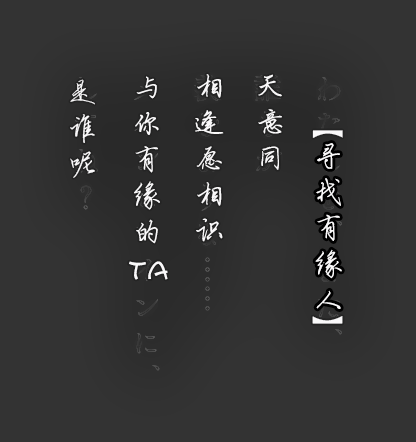
<style>
.page{position:relative;width:416px;height:442px;background:#333333}
.page>*{position:absolute;margin:0}
.t1{font:30px/36px "QXyingbixing";color:#faf9fa}
.t2{font:30px/36px "FZKATJW--GB1-0";color:#faf9fa}
.t3{font:30px "QXyingbixing";color:#faf8f9}
</style>
<div class="page">
<p class="t1" style="left:129px;top:76px;width:39px;height:204px;text-align:center">与<br>你<br>有<br>缘<br>的<br><span class="t2">ta</span></p>
<p class="t1" style="left:195px;top:74px;width:29px;height:168px;text-align:center">相<br>逢<br>愿<br>相<br>识</p>
<p class="t1" style="left:258px;top:74px;width:25px;height:96px;text-align:center">天<br>意<br>同</p>
<p class="t1" style="left:70px;top:79px;width:25px;height:99px;text-align:center">是<br>谁<br>呢</p>
<p class="t3" style="left:312px;top:130px;width:31px;height:194px;rotate:90deg">【                     】</p>
<p class="t1" style="left:315px;top:143px;width:27px;height:166px;text-align:center">寻<br>找<br>有<br>缘<br>人</p>
</div>
